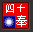
<style>
.page{position:relative;width:33px;height:32px;background:#f20000}
.page>*{position:absolute;margin:0}
.t1{font:10.4px "SimSun";color:#ffffff}
.t2{font:11.7px "SimSun";color:#ffffff}
</style>
<div class="page">
<p class="t1" style="left:6px;top:4px;width:19px;height:9px">四十</p>
<p class="t2" style="left:16px;top:15px;width:11px;height:12px">奉</p>
</div>
